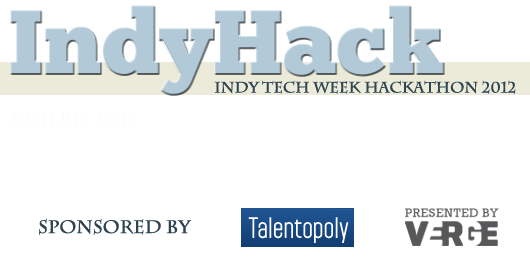
<style>
.page{position:relative;width:530px;height:275px;background:#ffffff}
.page>*{position:absolute;margin:0}
.t1{font:91.1px "ChunkFive";color:#b2c9d8}
.t2{font:15px "CharlemagneStd-Bold";color:#2f4451}
.t3{font:18px "CharlemagneStd-Bold";color:#2f4451}
</style>
<div class="page">
<p class="t1" style="left:10px;top:5px;width:434px;height:90px">IndyHack</p>
<p class="t2" style="left:214px;top:80px;width:302px;height:14px">Indy Tech Week Hackathon 2012</p>
<p class="t3" style="left:39px;top:218px;width:153px;height:17px">Sponsored By</p>
</div>
